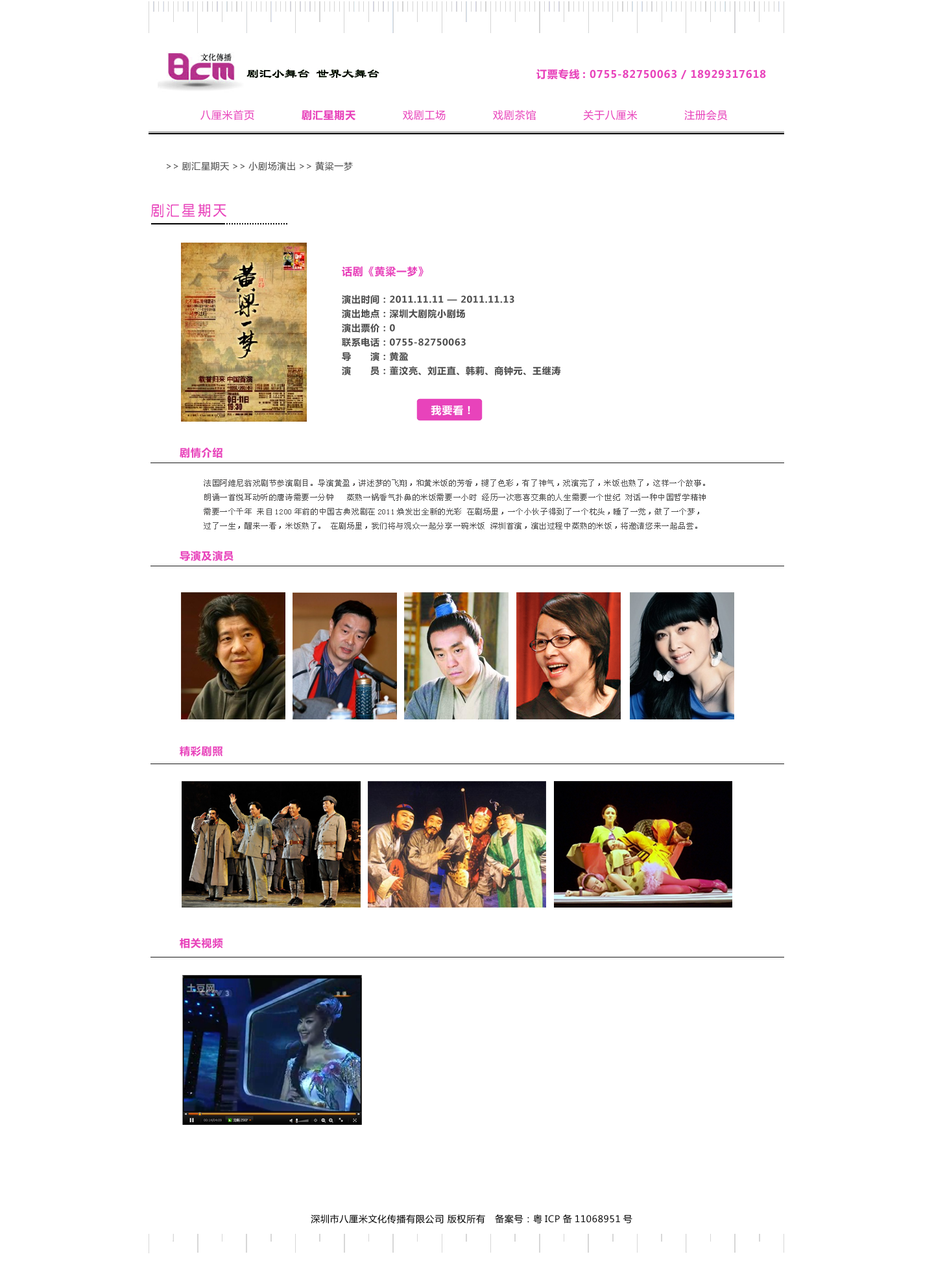
<style>
.page{position:relative;width:934px;height:1276px;background:#ffffff}
.page>*{position:absolute;margin:0}
.t1{font:10.4px "MicrosoftYaHei";letter-spacing:0.05em;color:#e843bb}
.t2{font:9.1px "MicrosoftYaHei";letter-spacing:0.05em;color:#4c4c4c}
.t3{font:14.9px "ÖÐÔ²Ìå-Regular";letter-spacing:0.05em;color:#e843bb}
.t4{font:9.1px/14.3px "MicrosoftYaHei";letter-spacing:0.05em;color:#4c4c4c}
.t5{font:10.4px/14.3px "MicrosoftYaHei";letter-spacing:0.05em;color:#e843bb}
.t6{font:10.4px "MicrosoftYaHei";letter-spacing:0.05em;color:#ffffff}
.t7{font:7.8px/14.3px "SimSun";letter-spacing:0.05em;color:#515050}
.t8{font:9.1px "MicrosoftYaHei";letter-spacing:0.05em;color:#000000}
</style>
<div class="page">
<p class="t1" style="left:537px;top:69px;width:229px;height:11px">订票专线: 0755-82750063 / 18929317618</p>
<p class="t1" style="left:200px;top:110px;width:528px;height:11px">八厘米首页             剧汇星期天             戏剧工场             戏剧茶馆             关于八厘米             注册会员</p>
<p class="t2" style="left:167px;top:162px;width:186px;height:9px">&gt;&gt;剧汇星期天&gt;&gt;小剧场演出&gt;&gt;黄粱一梦</p>
<p class="t3" style="left:151px;top:204px;width:75px;height:13px">剧汇星期天</p>
<p class="t4" style="left:342px;top:266px;width:219px;height:110px"><span class="t5">话剧《黄粱一梦》 <br><br></span>演出时间：2011.11.11 — 2011.11.13 <br>演出地点：深圳大剧院小剧场 <br>演出票价：0 <br>联系电话：0755-82750063 <br>导　　演：黄盈 <br>演　　员：董汶亮、刘正直、韩莉、商钟元、王继涛</p>
<p class="t6" style="left:431px;top:405px;width:39px;height:11px">我要看！</p>
<p class="t1" style="left:180px;top:448px;width:43px;height:10px">剧情介绍</p>
<p class="t7" style="left:204px;top:479px;width:502px;height:50px">法国阿维尼翁戏剧节参演剧目。导演黄盈，讲述梦的飞翔，和黄米饭的芳香，褪了色彩，有了神气，戏演完了，米饭也熟了，这样一个故事。 <br>朗诵一首悦耳动听的唐诗需要一分钟 　蒸熟一锅香气扑鼻的米饭需要一小时 经历一次悲喜交集的人生需要一个世纪 对话一种中国哲学精神<br>需要一个千年 来自1200年前的中国古典戏剧在2011焕发出全新的光彩 在剧场里，一个小伙子得到了一个枕头，睡了一觉，做了一个梦，<br>过了一生，醒来一看，米饭熟了。 在剧场里，我们将与观众一起分享一碗米饭 深圳首演，演出过程中蒸熟的米饭，将邀请您来一起品尝。</p>
<p class="t1" style="left:180px;top:551px;width:54px;height:10px">导演及演员</p>
<p class="t1" style="left:180px;top:746px;width:43px;height:11px">精彩剧照</p>
<p class="t1" style="left:180px;top:938px;width:43px;height:11px">相关视频</p>
<p class="t8" style="left:311px;top:1215px;width:322px;height:9px">深圳市八厘米文化传播有限公司 版权所有   备案号：粤ICP备11068951号</p>
</div>
